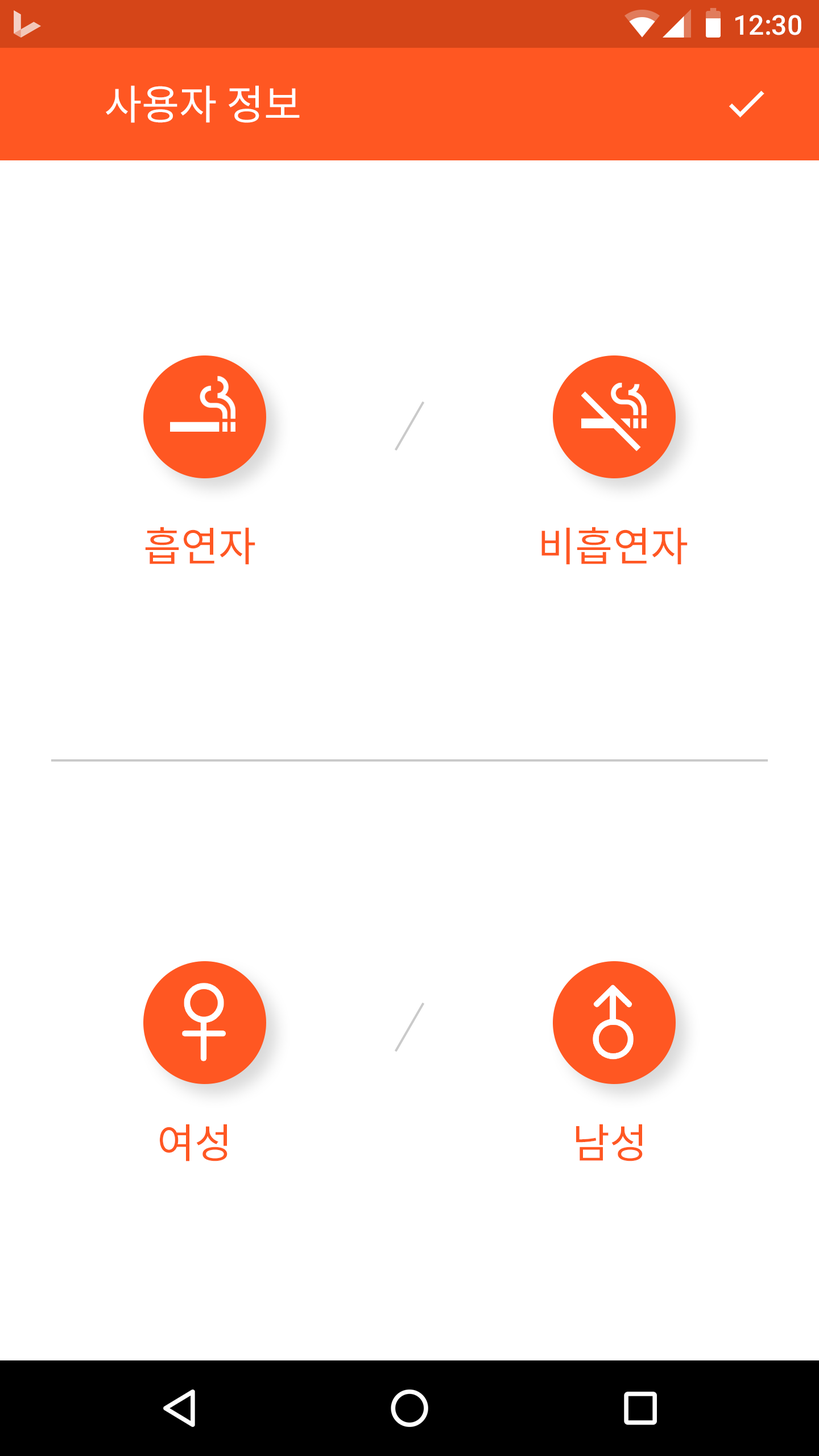
<style>
.page{position:relative;width:819px;height:1456px;background:#ffffff}
.page>*{position:absolute;margin:0}
.t1{font:27.3px "Roboto-Medium";color:#ffffff}
.t2{font:40.9px "NotoSansCJKkr-Regular";color:#ffffff}
.t3{font:40.9px "NotoSansCJKkr-Regular";color:#ff5722}
</style>
<div class="page">
<p class="t1" style="left:735px;top:15px;width:66px;height:20px">12:30</p>
<p class="t2" style="left:106px;top:85px;width:194px;height:38px">사용자 정보</p>
<p class="t3" style="left:145px;top:527px;width:110px;height:38px">흡연자</p>
<p class="t3" style="left:541px;top:527px;width:147px;height:38px">비흡연자</p>
<p class="t3" style="left:160px;top:1124px;width:67px;height:37px">여성</p>
<p class="t3" style="left:576px;top:1124px;width:67px;height:37px">남성</p>
</div>
